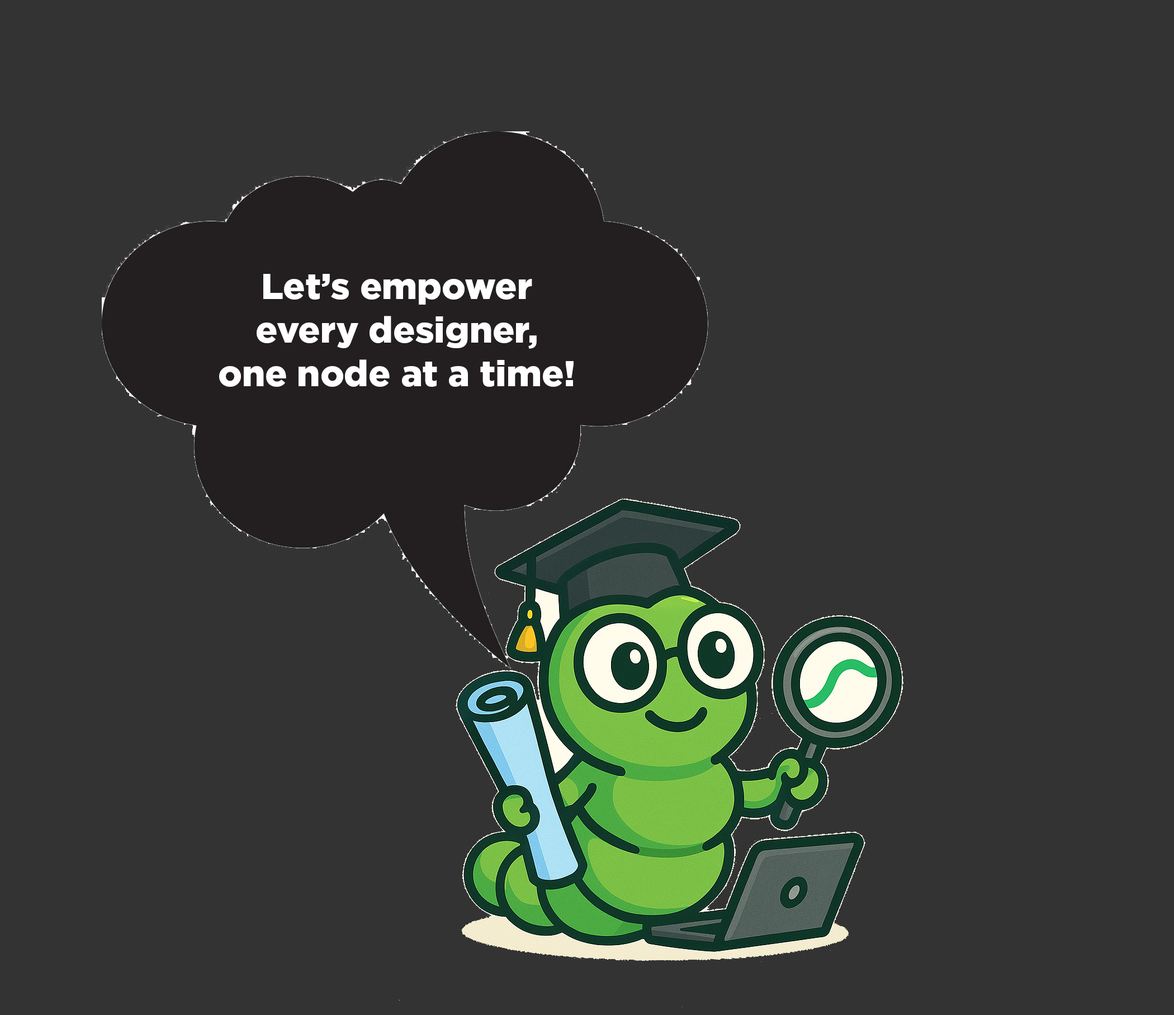
<style>
.page{position:relative;width:1174px;height:1015px;background:#333333}
.page>*{position:absolute;margin:0}
.t1{font:36.3px "Gotham-Black";color:#ffffff}
</style>
<div class="page">
<p class="t1" style="left:219px;top:274px;width:355px;height:113px;text-align:center">Let’s empower every designer, <br>one node at a time!</p>
</div>
